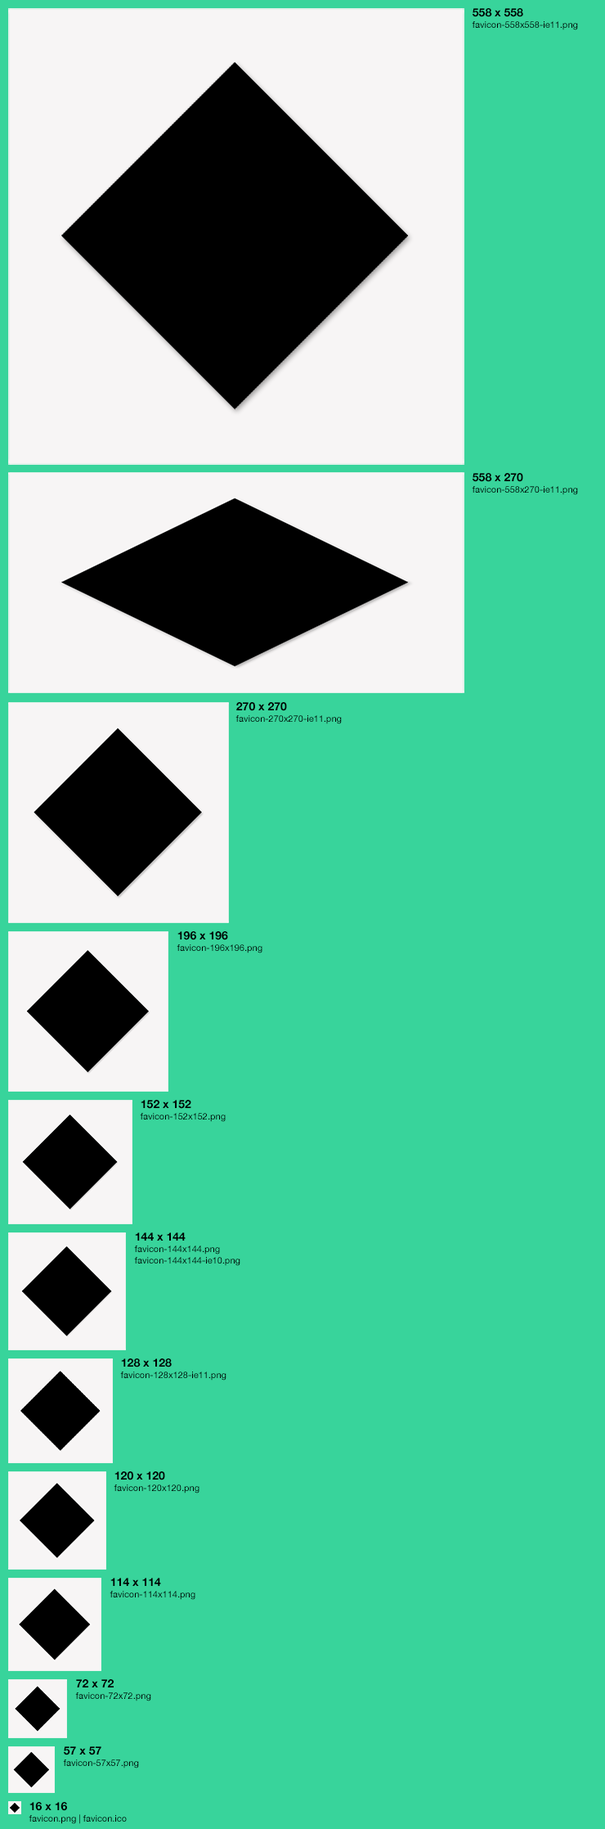
<style>
.page{position:relative;width:605px;height:1829px;background:#38d49b}
.page>*{position:absolute;margin:0}
.t1{font:9px/11.5px "HelveticaNeue";color:#000000}
.t2{font:11.5px/11.5px "HelveticaNeue-Bold";color:#000000}
</style>
<div class="page">
<p class="t1" style="left:472px;top:8px;width:106px;height:22px"><span class="t2">558 x 558<br></span>favicon-558x558-ie11.png</p>
<p class="t1" style="left:472px;top:473px;width:106px;height:22px"><span class="t2">558 x 270<br></span>favicon-558x270-ie11.png</p>
<p class="t1" style="left:236px;top:702px;width:106px;height:22px"><span class="t2">270 x 270<br></span>favicon-270x270-ie11.png</p>
<p class="t1" style="left:177px;top:931px;width:86px;height:22px"><span class="t2">196 x 196<br></span>favicon-196x196.png</p>
<p class="t1" style="left:140px;top:1100px;width:86px;height:22px"><span class="t2">152 x 152<br></span>favicon-152x152.png</p>
<p class="t1" style="left:134px;top:1232px;width:107px;height:34px"><span class="t2">144 x 144<br></span>favicon-144x144.png<br>favicon-144x144-ie10.png</p>
<p class="t1" style="left:120px;top:1358px;width:107px;height:22px"><span class="t2">128 x 128<br></span>favicon-128x128-ie11.png</p>
<p class="t1" style="left:114px;top:1471px;width:86px;height:22px"><span class="t2">120 x 120<br></span>favicon-120x120.png</p>
<p class="t1" style="left:110px;top:1577px;width:86px;height:23px"><span class="t2">114 x 114<br></span>favicon-114x114.png</p>
<p class="t1" style="left:75px;top:1679px;width:76px;height:22px"><span class="t2">72 x 72<br></span>favicon-72x72.png</p>
<p class="t1" style="left:63px;top:1746px;width:76px;height:22px"><span class="t2">57 x 57<br></span>favicon-57x57.png</p>
<p class="t1" style="left:29px;top:1802px;width:98px;height:22px"><span class="t2">16 x 16<br></span>favicon.png | favicon.ico</p>
</div>
